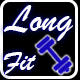
<style>
.page{position:relative;width:80px;height:80px;background:#000000}
.page>*{position:absolute;margin:0}
.t1{font:39.9px "BrushScriptMT";color:#ffffff}
.t2{font:29.5px "BrushScriptMT";color:#ffffff}
</style>
<div class="page">
<p class="t1" style="left:3px;top:5px;width:70px;height:36px">Long</p>
<p class="t2" style="left:4px;top:52px;width:32px;height:22px">Fit</p>
</div>
